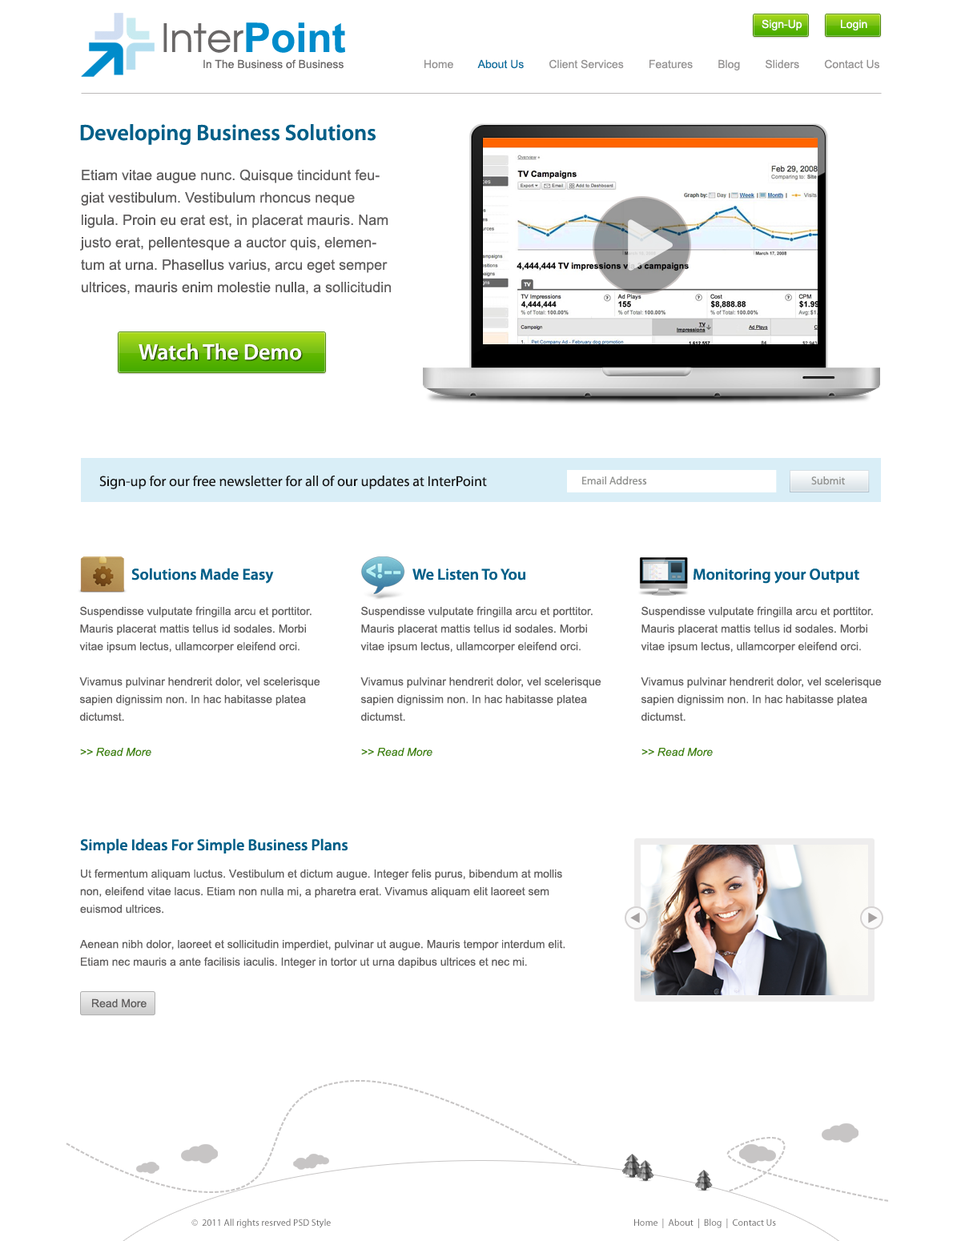
<style>
.page{position:relative;width:961px;height:1241px;background:#ffffff}
.page>*{position:absolute;margin:0}
.t1{font:40.8px "Avanti";color:#696767}
.t2{font:40.8px "Arial-BoldMT";color:#008ccb}
.t3{font:11.2px "ArialMT";color:#ffffff}
.t4{font:11.2px "ArialMT";color:#696767}
.t5{font:11.2px "ArialMT";color:#959393}
.t6{font:11.2px "ArialMT";color:#036e9e}
.t7{font:22.4px "MyriadPro-Semibold";color:#035f88}
.t8{font:14.4px/22.4px "ArialMT";color:#5f5d5d}
.t9{font:22.4px "MyriadPro-Semibold";color:#ffffff}
.t10{font:14.4px "MyriadPro-Regular";color:#181818}
.t11{font:11.2px "MyriadPro-Regular";color:#939492}
.t12{font:16px "MyriadPro-Semibold";color:#035f88}
.t13{font:11.2px/17.6px "ArialMT";color:#5f5d5d}
.t14{font:11.2px/12.8px "Arial-ItalicMT";color:#3c8203}
.t15{font:11.2px "ArialMT";color:#5f5d5d}
.t16{font:9.6px "MyriadPro-Regular";color:#6e6d6d}
</style>
<div class="page">
<p class="t1" style="left:163px;top:22px;width:182px;height:31px">Inter<span class="t2">Point</span></p>
<p class="t3" style="left:761px;top:19px;width:41px;height:11px">Sign-Up</p>
<p class="t3" style="left:841px;top:19px;width:26px;height:11px">Login</p>
<p class="t4" style="left:203px;top:59px;width:140px;height:10px">In The Business of Business</p>
<p class="t5" style="left:424px;top:59px;width:455px;height:11px">Home        <span class="t6">About Us</span>        Client Services        Features        Blog        Sliders        Contact Us</p>
<p class="t7" style="left:80px;top:124px;width:296px;height:21px">Developing Business Solutions</p>
<p class="t8" style="left:80px;top:169px;width:311px;height:126px">Etiam vitae augue nunc. Quisque tincidunt feugiat vestibulum. Vestibulum rhoncus neque ligula. Proin eu erat est, in placerat mauris. Nam justo erat, pellentesque a auctor quis, elementum at urna. Phasellus varius, arcu eget semper ultrices, mauris enim molestie nulla, a sollicitudin ante risus vitae orci.</p>
<p class="t9" style="left:139px;top:343px;width:163px;height:17px">Watch The Demo</p>
<p class="t10" style="left:99px;top:476px;width:388px;height:13px">Sign-up for our free newsletter for all of our updates at InterPoint</p>
<p class="t11" style="left:582px;top:476px;width:65px;height:9px">Email Address</p>
<p class="t11" style="left:811px;top:476px;width:34px;height:9px">Submit</p>
<p class="t12" style="left:131px;top:568px;width:143px;height:16px">Solutions Made Easy</p>
<p class="t12" style="left:412px;top:568px;width:113px;height:12px">We Listen To You</p>
<p class="t12" style="left:693px;top:568px;width:166px;height:16px">Monitoring your Output</p>
<p class="t13" style="left:79px;top:606px;width:241px;height:151px">Suspendisse vulputate fringilla arcu et porttitor. Mauris placerat mattis tellus id sodales. Morbi vitae ipsum lectus, ullamcorper eleifend orci.<br><br>Vivamus pulvinar hendrerit dolor, vel scelerisque sapien dignissim non. In hac habitasse platea dictumst. <br><br><span class="t14">&gt;&gt; Read More</span></p>
<p class="t13" style="left:360px;top:606px;width:241px;height:151px">Suspendisse vulputate fringilla arcu et porttitor. Mauris placerat mattis tellus id sodales. Morbi vitae ipsum lectus, ullamcorper eleifend orci.<br><br>Vivamus pulvinar hendrerit dolor, vel scelerisque sapien dignissim non. In hac habitasse platea dictumst. <br><br><span class="t14">&gt;&gt; Read More</span></p>
<p class="t13" style="left:641px;top:606px;width:241px;height:151px">Suspendisse vulputate fringilla arcu et porttitor. Mauris placerat mattis tellus id sodales. Morbi vitae ipsum lectus, ullamcorper eleifend orci.<br><br>Vivamus pulvinar hendrerit dolor, vel scelerisque sapien dignissim non. In hac habitasse platea dictumst. <br><br><span class="t14">&gt;&gt; Read More</span></p>
<p class="t12" style="left:80px;top:838px;width:267px;height:16px">Simple Ideas For Simple Business Plans</p>
<p class="t13" style="left:79px;top:869px;width:486px;height:99px">Ut fermentum aliquam luctus. Vestibulum et dictum augue. Integer felis purus, bibendum at mollis non, eleifend vitae lacus. Etiam non nulla mi, a pharetra erat. Vivamus aliquam elit laoreet sem euismod ultrices. <br><br>Aenean nibh dolor, laoreet et sollicitudin imperdiet, pulvinar ut augue. Mauris tempor interdum elit. Etiam nec mauris a ante facilisis iaculis. Integer in tortor ut urna dapibus ultrices et nec mi.</p>
<p class="t15" style="left:92px;top:998px;width:55px;height:10px">Read More</p>
<p class="t16" style="left:191px;top:1219px;width:140px;height:9px">©  2011 All rights resrved PSD Style</p>
<p class="t16" style="left:634px;top:1219px;width:142px;height:9px">Home  |  About  |  Blog  |  Contact Us</p>
</div>
